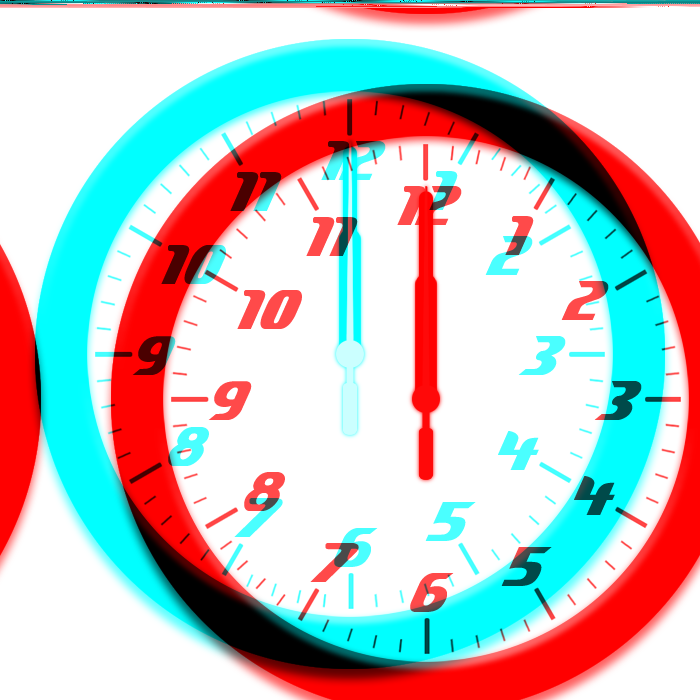
<style>
.page{position:relative;width:700px;height:700px;background:#ffffff}
.page>*{position:absolute;margin:0}
.t1{font:105px "DeftoneStylus"}
.t2{font:105px "DeftoneStylus";letter-spacing:0.05em}
.t3{font:105px "DeftoneStylus";color:#4affff}
</style>
<div class="page">
<p class="t1" style="left:321px;top:137px;width:65px;height:39px">12</p>
<p class="t2" style="left:230px;top:168px;width:52px;height:39px">11</p>
<p class="t1" style="left:429px;top:167px;width:29px;height:39px">1</p>
<p class="t1" style="left:485px;top:232px;width:48px;height:39px">2</p>
<p class="t1" style="left:161px;top:241px;width:65px;height:39px">10</p>
<p class="t1" style="left:132px;top:332px;width:44px;height:39px">9</p>
<p class="t1" style="left:518px;top:332px;width:48px;height:39px">3</p>
<p class="t1" style="left:168px;top:423px;width:41px;height:39px">8</p>
<p class="t3" style="left:498px;top:427px;width:41px;height:39px">4</p>
<p class="t1" style="left:234px;top:494px;width:49px;height:39px">7</p>
<p class="t1" style="left:425px;top:498px;width:51px;height:39px">5</p>
<p class="t1" style="left:334px;top:524px;width:44px;height:39px">6</p>
</div>
